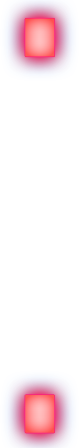
<style>
.page{position:relative;width:80px;height:448px;background:#ffffff}
.page>*{position:absolute;margin:0}
.t1{font:481.8px "Curveless";letter-spacing:0.025em;scale:0.76 1}
</style>
<div class="page">
<p class="t1" style="left:25px;top:18px;width:30px;height:415px">:</p>
<p class="t1" style="left:25px;top:18px;width:30px;height:415px">:</p>
</div>
